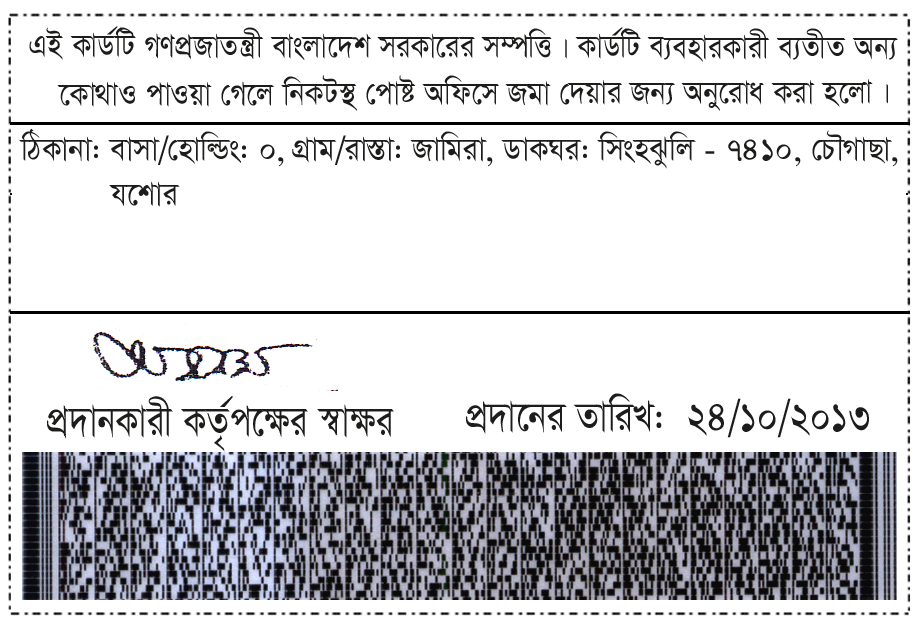
<style>
.page{position:relative;width:915px;height:625px;background:#ffffff}
.page>*{position:absolute;margin:0}
.t1{font:37.5px "SutonnyMJ";color:#1c1d1b;scale:0.88 1}
.t2{font:37.5px "SutonnyMJ";color:#1c1d1b;scale:0.9 1}
.t3{font:37.5px "SutonnyMJ";color:#1c1d1b;scale:0.94 1}
.t4{font:50.2px "SutonnyMJ";color:#1c1d1b;scale:0.81 1}
.t5{font:48.7px "SutonnyMJ";color:#1c1d1b;scale:0.85 1}
</style>
<div class="page">
<p class="t1" style="left:29px;top:26px;width:869px;height:37px">GB KvW©wU MYcÖRvZš¿x evsjv‡`k miKv‡ii m¤úwË| KvW©wU e¨enviKvix e¨ZxZ Ab¨</p>
<p class="t2" style="left:57px;top:75px;width:831px;height:36px">‡Kv_vI cvIqv †M‡j wbKU¯’ †cvó Awd‡m Rgv †`qvi Rb¨ Aby‡iva Kiv n‡jv|</p>
<p class="t3" style="left:19px;top:128px;width:879px;height:41px">wVKvbv: evmv/†nvwìs: 0, MÖvg/iv¯Ív: Rvwgiv, WvKNi: wmsnSzwj - 7410, †PŠMvQv,</p>
<p class="t3" style="left:109px;top:181px;width:71px;height:26px">h‡kvi</p>
<p class="t4" style="left:47px;top:396px;width:347px;height:56px">cÖ`vbKvix KZ…©c‡¶i ¯^v¶i</p>
<p class="t5" style="left:466px;top:393px;width:403px;height:45px">cÖ`v‡bi ZvwiL:  24/10/2013</p>
</div>
